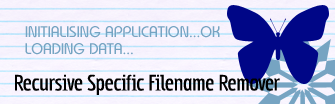
<style>
.page{position:relative;width:335px;height:104px}
.page>*{position:absolute;margin:0}
.t1{font:14px "Belgium";color:#76a4c2}
.t2{font:14px "Subpear";color:#000000}
</style>
<div class="page">
<p class="t1" style="left:25px;top:26px;width:195px;height:29px">INITIALISING APPLICATION...OK<br>LOADING DATA...</p>
<p class="t2" style="left:15px;top:74px;width:265px;height:21px">Recursive Specific Filename Remover</p>
</div>
